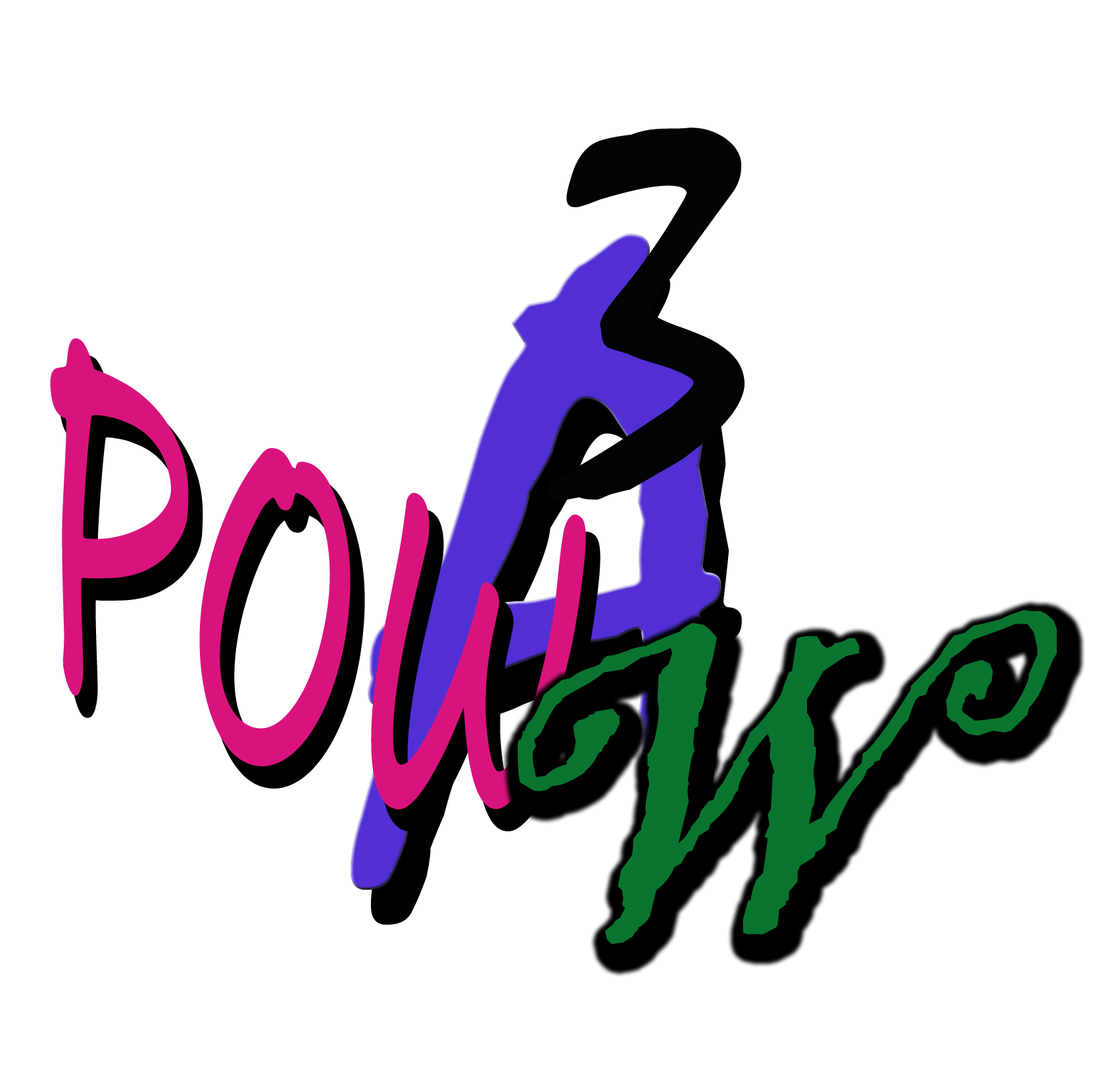
<style>
.page{position:relative;width:1099px;height:1085px;background:#ffffff}
.page>*{position:absolute;margin:0}
.t1{font:526px "Mistral";color:#030303}
.t2{font:852px "Mistral"}
.t3{font:328.7px "MVBoli";color:#d9137e;font-variant:small-caps}
.t4{font:460.2px "BlackadderITC-Regular";color:#09742f}
</style>
<div class="page">
<p class="t1" style="left:547px;top:128px;width:197px;height:373px">3</p>
<p class="t2" style="left:350px;top:233px;width:371px;height:657px">A</p>
<p class="t3" style="left:50px;top:339px;width:536px;height:471px">pow</p>
<p class="t4" style="left:517px;top:610px;width:540px;height:335px">W</p>
</div>
